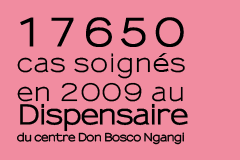
<style>
.page{position:relative;width:240px;height:160px;background:#f18ca0}
.page>*{position:absolute;margin:0}
.t1{font:10.5px/17px "Sansumi-Bold";letter-spacing:-0.04em;color:#000000;font-weight:bold}
.t2{font:24px/25px "Sansumi-Bold";letter-spacing:-0.04em;color:#000000}
.t3{font:38.2px/25px "Sansumi-Bold";letter-spacing:0.12em;color:#000000;font-weight:bold;scale:0.93 1}
.t4{font:24px/26px "Sansumi-Bold";letter-spacing:0.04em;color:#000000}
.t5{font:24px/29px "Sansumi-Bold";letter-spacing:0.04em;color:#000000}
.t6{font:26px/23px "Sansumi-Bold";letter-spacing:-0.04em;color:#000000;font-weight:bold}
</style>
<div class="page">
<p class="t1" style="left:17px;top:17px;width:171px;height:128px"><span class="t2"><br></span><span class="t3">17650<br></span><span class="t4">cas soignés<br></span><span class="t5">en 2009 au<br></span><span class="t6">Dispensaire<br></span>du centre Don Bosco Ngangi</p>
</div>
